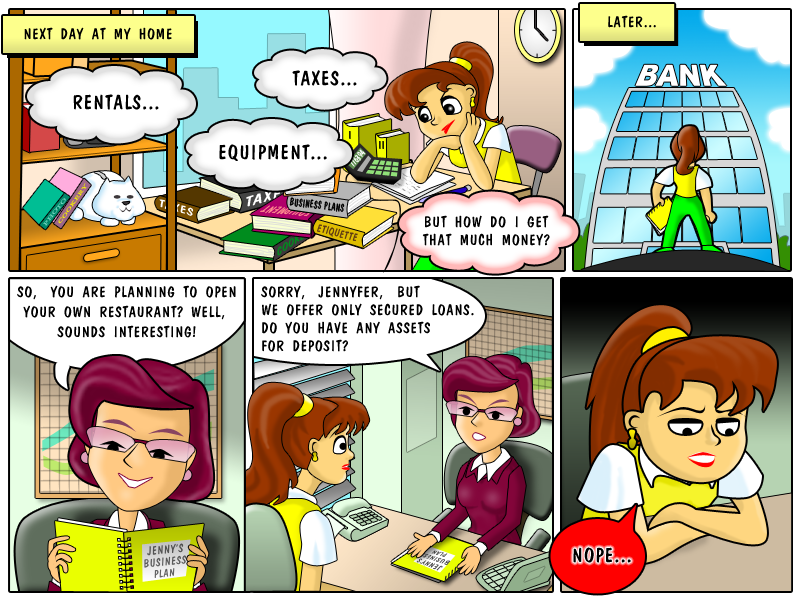
<style>
.page{position:relative;width:800px;height:600px;background:#ffffff}
.page>*{position:absolute;margin:0}
.t1{font:18px "DomCasual-Thin";letter-spacing:0.01em;color:#000000}
.t2{font:24px "DomCasual-Thin";letter-spacing:0.01em;color:#000000}
.t3{font:18px/18px "DomCasual-Thin";letter-spacing:0.01em;color:#000000}
.t4{font:18px/20px "DomCasual-Thin";letter-spacing:0.01em;color:#000000}
</style>
<div class="page">
<p class="t1" style="left:608px;top:15px;width:48px;height:13px">LATER...</p>
<p class="t1" style="left:24px;top:27px;width:148px;height:13px">NEXT DAY AT MY HOME</p>
<p class="t2" style="left:292px;top:70px;width:65px;height:16px">TAXES...</p>
<p class="t2" style="left:73px;top:94px;width:86px;height:16px">RENTALS...</p>
<p class="t2" style="left:219px;top:144px;width:108px;height:17px">EQUIPMENT...</p>
<p class="t3" style="left:422px;top:215px;width:128px;height:31px;text-align:center">BUT HOW DO I GET<br>THAT MUCH MONEY?</p>
<p class="t4" style="left:17px;top:285px;width:219px;height:53px;text-align:center">SO, YOU ARE PLANNING TO OPEN<br>YOUR OWN RESTAURANT? WELL,<br>SOUNDS INTERESTING!</p>
<p class="t3" style="left:261px;top:285px;width:213px;height:67px">SORRY, JENNYFER, BUT <br>WE OFFER ONLY SECURED LOANS. <br>DO YOU HAVE ANY ASSETS <br>FOR DEPOSIT?</p>
<p class="t2" style="left:573px;top:547px;width:58px;height:16px">NOPE...</p>
</div>
